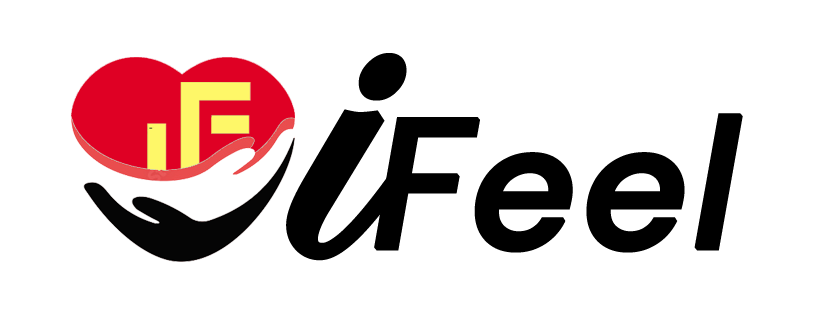
<style>
.page{position:relative;width:818px;height:318px;background:#ffffff}
.page>*{position:absolute;margin:0}
.t1{font:183.3px "DMSans-MediumItalic";color:#000000;font-weight:bold}
.t2{font:500px "EdwardianScriptITC";color:#000000;font-weight:bold}
</style>
<div class="page">
<p class="t1" style="left:286px;top:53px;width:457px;height:208px"><span class="t2">i</span>Feel</p>
</div>
